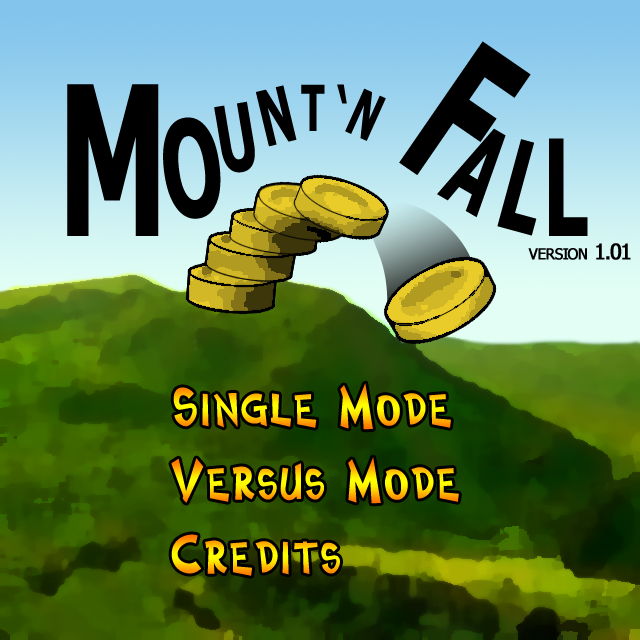
<style>
.page{position:relative;width:640px;height:640px}
.page>*{position:absolute;margin:0}
.t1{font:202px "Tahoma-Bold";letter-spacing:-0.1em;color:#000000;scale:0.59 1}
.t2{font:208.2px "Tahoma-Bold";letter-spacing:-0.1em;color:#000000;scale:0.59 1}
.t3{font:76.5px "Tahoma-Bold";letter-spacing:-0.1em;color:#000000;scale:0.59 1}
.t4{font:63.6px "Tahoma-Bold";letter-spacing:-0.1em;color:#000000;scale:0.59 1}
.t5{font:65.9px "Tahoma-Bold";letter-spacing:-0.1em;color:#000000;scale:0.59 1}
.t6{font:63.8px "Tahoma-Bold";letter-spacing:-0.1em;color:#000000;scale:0.59 1}
.t7{font:92px "Tahoma-Bold";letter-spacing:-0.1em;color:#000000;scale:0.59 1}
.t8{font:133.8px "Tahoma-Bold";letter-spacing:-0.1em;color:#000000;scale:0.59 1}
.t9{font:116.8px "Tahoma-Bold";letter-spacing:-0.1em;color:#000000;scale:0.56 1}
.t10{font:123.7px "Tahoma-Bold";letter-spacing:-0.1em;color:#000000;scale:0.59 1}
.t11{font:37.5px "Tahoma";letter-spacing:-0.05em;color:#000000;font-variant:small-caps;font-weight:bold}
.t12{font:48px "CosmicTwoPlain"}
</style>
<div class="page">
<p class="t1" style="left:399px;top:41px;width:132px;height:134px;rotate:35deg">F</p>
<p class="t2" style="left:67px;top:84px;width:92px;height:152px">M</p>
<p class="t3" style="left:256px;top:85px;width:41px;height:62px;rotate:-14deg">N</p>
<p class="t4" style="left:301px;top:84px;width:24px;height:47px">T</p>
<p class="t5" style="left:337px;top:84px;width:10px;height:20px">‘</p>
<p class="t6" style="left:345px;top:88px;width:41px;height:53px;rotate:24deg">N</p>
<p class="t7" style="left:214px;top:101px;width:41px;height:72px;rotate:-10deg">U</p>
<p class="t8" style="left:163px;top:117px;width:58px;height:102px;rotate:-7deg">O</p>
<p class="t9" style="left:437px;top:128px;width:69px;height:90px;rotate:30deg">A</p>
<p class="t10" style="left:497px;top:139px;width:40px;height:97px;rotate:15deg">L</p>
<p class="t8" style="left:549px;top:138px;width:39px;height:98px">L</p>
<p class="t11" style="left:528px;top:243px;width:103px;height:17px">version 1.01</p>
<p class="t12" style="left:173px;top:383px;width:278px;height:47px">Single Mode</p>
<p class="t12" style="left:171px;top:457px;width:288px;height:47px">Versus Mode</p>
<p class="t12" style="left:171px;top:534px;width:169px;height:42px">Credits</p>
</div>
